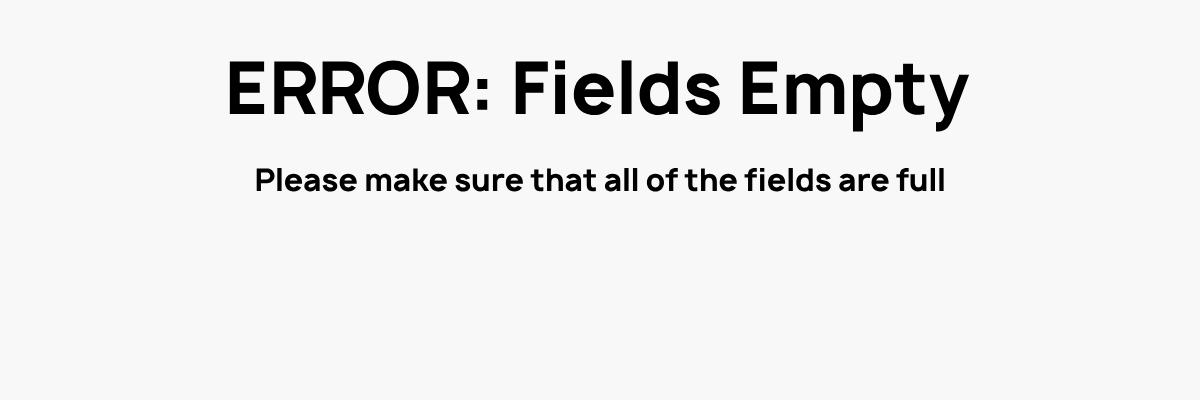
<style>
.page{position:relative;width:1200px;height:400px;background:#f8f8f8}
.page>*{position:absolute;margin:0}
.t1{font:70px "Manrope-Bold";color:#000000}
.t2{font:30px "Manrope-Bold";color:#000000}
</style>
<div class="page">
<p class="t1" style="left:229px;top:60px;width:741px;height:72px">ERROR: Fields Empty</p>
<p class="t2" style="left:256px;top:167px;width:688px;height:25px">Please make sure that all of the fields are full</p>
</div>
